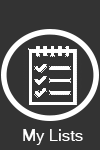
<style>
.page{position:relative;width:100px;height:150px;background:#333333}
.page>*{position:absolute;margin:0}
.t1{font:16.7px "MicrosoftSansSerif";color:#ffffff}
</style>
<div class="page">
<p class="t1" style="left:23px;top:129px;width:60px;height:16px">My Lists</p>
</div>
